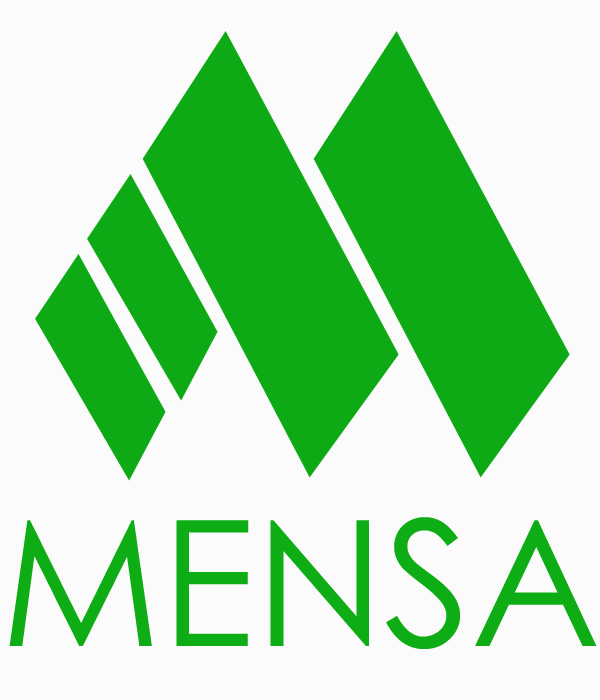
<style>
.page{position:relative;width:600px;height:700px;background:#fcfbfb}
.page>*{position:absolute;margin:0}
.t1{font:175px "CenturyGothic";color:#0ead15}
</style>
<div class="page">
<p class="t1" style="left:9px;top:517px;width:588px;height:132px">MENSA</p>
</div>
